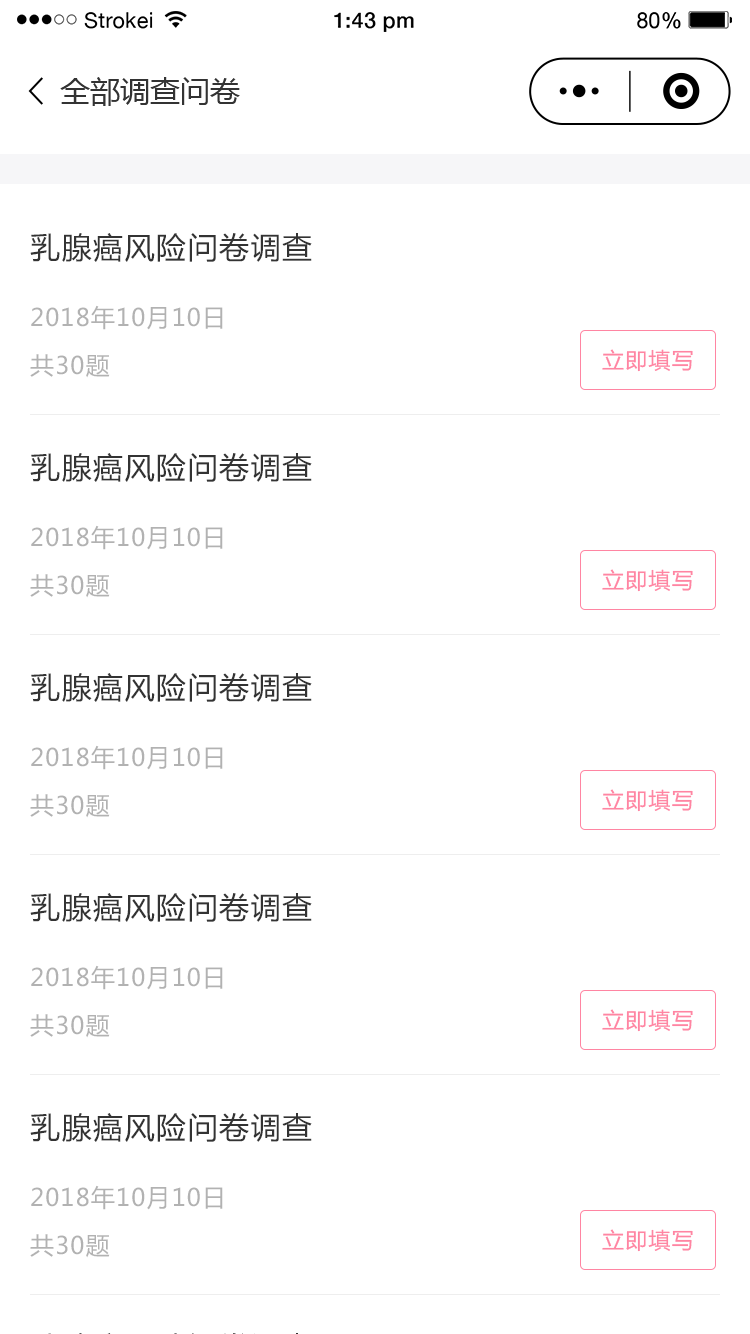
<style>
.page{position:relative;width:750px;height:1334px;background:#ffffff}
.page>*{position:absolute;margin:0}
.t1{font:30px "MicrosoftYaHei";color:#333333}
.t2{font:24px/68px "MicrosoftYaHei";letter-spacing:0.05em;color:#b2b2b2}
.t3{font:30px/60px "MicrosoftYaHei";letter-spacing:0.05em;color:#333333}
.t4{font:30px/68px "MicrosoftYaHei";letter-spacing:0.05em;color:#333333}
.t5{font:24px/48px "MicrosoftYaHei";letter-spacing:0.05em;color:#b2b2b2}
.t6{font:22px "MicrosoftYaHei";letter-spacing:0.05em;color:#ff85a2}
</style>
<div class="page">
<p class="t1" style="left:60px;top:77px;width:180px;height:29px">全部调查问卷</p>
<p class="t2" style="left:30px;top:233px;width:282px;height:145px"><span class="t3">乳腺癌</span><span class="t4">风险问卷调查<br></span>2018年10月10日<br><span class="t5">共30题</span></p>
<p class="t6" style="left:602px;top:349px;width:91px;height:23px">立即填写</p>
<p class="t2" style="left:30px;top:453px;width:282px;height:145px"><span class="t3">乳腺癌</span><span class="t4">风险问卷调查<br></span>2018年10月10日<br><span class="t5">共30题</span></p>
<p class="t6" style="left:602px;top:569px;width:91px;height:23px">立即填写</p>
<p class="t2" style="left:30px;top:673px;width:282px;height:145px"><span class="t3">乳腺癌</span><span class="t4">风险问卷调查<br></span>2018年10月10日<br><span class="t5">共30题</span></p>
<p class="t6" style="left:602px;top:789px;width:91px;height:23px">立即填写</p>
<p class="t2" style="left:30px;top:893px;width:282px;height:145px"><span class="t3">乳腺癌</span><span class="t4">风险问卷调查<br></span>2018年10月10日<br><span class="t5">共30题</span></p>
<p class="t6" style="left:602px;top:1009px;width:91px;height:23px">立即填写</p>
<p class="t2" style="left:30px;top:1113px;width:282px;height:145px"><span class="t3">乳腺癌</span><span class="t4">风险问卷调查<br></span>2018年10月10日<br><span class="t5">共30题</span></p>
<p class="t6" style="left:602px;top:1229px;width:91px;height:23px">立即填写</p>
</div>
